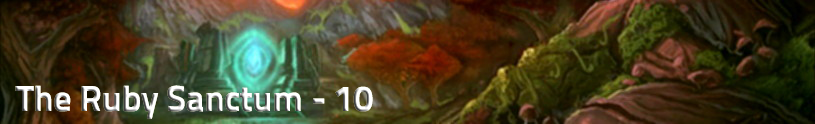
<style>
.page{position:relative;width:815px;height:124px}
.page>*{position:absolute;margin:0}
.t1{font:36px "TitilliumText22L-999wt";letter-spacing:-0.005em}
</style>
<div class="page">
<p class="t1" style="left:15px;top:85px;width:358px;height:34px">The Ruby Sanctum - 10</p>
</div>
